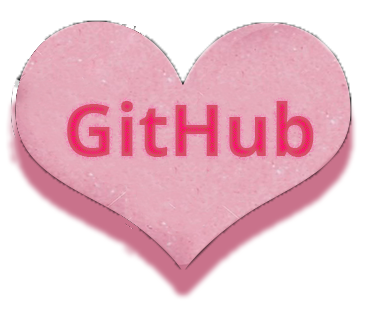
<style>
.page{position:relative;width:374px;height:314px;background:#ffffff}
.page>*{position:absolute;margin:0}
.t1{font:72px "OpenSans-Bold"}
</style>
<div class="page">
<p class="t1" style="left:67px;top:101px;width:247px;height:56px">GitHub</p>
</div>
